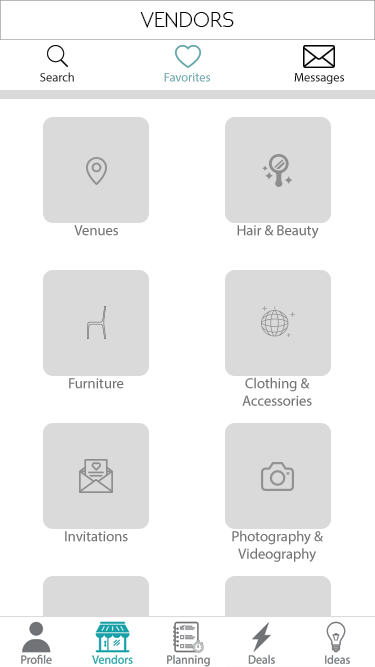
<style>
.page{position:relative;width:375px;height:667px;background:#ffffff}
.page>*{position:absolute;margin:0}
.t1{font:21.9px "NEOTERIC";color:#000000}
.t2{font:12.5px "MyriadPro-Regular";color:#050505}
.t3{font:12.5px "MyriadPro-Regular";color:#71bcc1}
.t4{font:12.5px "MyriadPro-Regular";color:#000000}
.t5{font:14.6px "MyriadPro-Regular";color:#838383}
</style>
<div class="page">
<p class="t1" style="left:140px;top:12px;width:94px;height:16px">VENDORS</p>
<p class="t2" style="left:40px;top:72px;width:34px;height:10px">Search</p>
<p class="t3" style="left:164px;top:73px;width:46px;height:9px">Favorites</p>
<p class="t4" style="left:294px;top:73px;width:50px;height:11px">Messages</p>
<p class="t5" style="left:74px;top:225px;width:44px;height:11px">Venues</p>
<p class="t5" style="left:237px;top:225px;width:82px;height:14px">Hair &amp; Beauty</p>
<p class="t5" style="left:242px;top:377px;width:70px;height:29px;text-align:center">Clothing &amp;<br>Accessories</p>
<p class="t5" style="left:69px;top:378px;width:55px;height:11px">Furniture</p>
<p class="t5" style="left:65px;top:531px;width:63px;height:11px">Invitations</p>
<p class="t5" style="left:232px;top:530px;width:91px;height:32px;text-align:center">Photography &amp; Videography</p>
</div>
